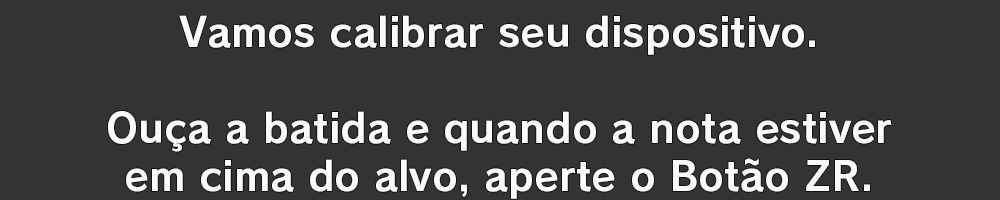
<style>
.page{position:relative;width:1000px;height:200px;background:#333333}
.page>*{position:absolute;margin:0}
.t1{font:40px/48px "RodinPro-B";color:#fbfafb}
</style>
<div class="page">
<p class="t1" style="left:108px;top:15px;width:784px;height:184px;text-align:center">Vamos calibrar seu dispositivo.<br><br>Ouça a batida e quando a nota estiver<br>em cima do alvo, aperte o Botão ZR.</p>
</div>
